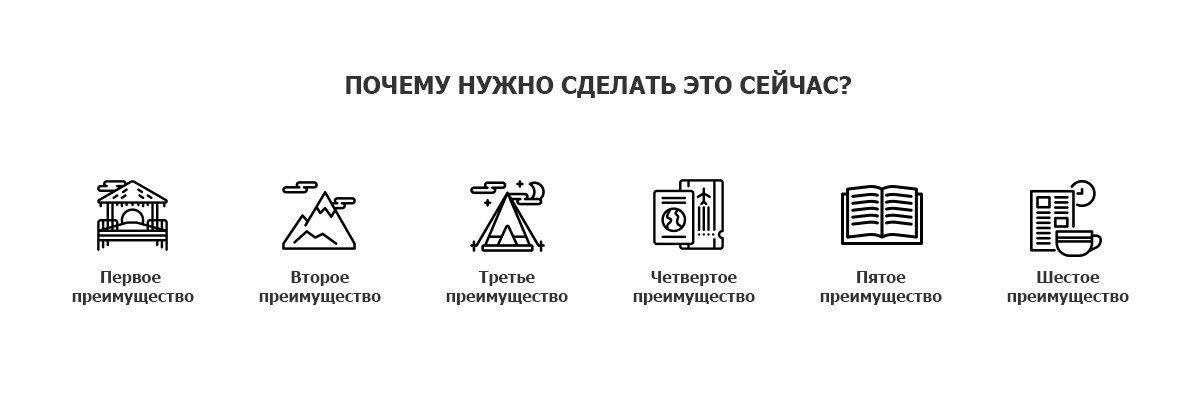
<style>
.page{position:relative;width:1200px;height:402px;background:#ffffff}
.page>*{position:absolute;margin:0}
.t1{font:24px "Tahoma-Bold";color:#333333;text-transform:uppercase}
.t2{font:16px "Tahoma-Bold";color:#333333}
</style>
<div class="page">
<p class="t1" style="left:346px;top:70px;width:506px;height:28px">Почему нужно сделать это сейчас?</p>
<p class="t2" style="left:72px;top:271px;width:122px;height:34px;text-align:center">Первое <br>преимущество</p>
<p class="t2" style="left:259px;top:271px;width:122px;height:34px;text-align:center">Второе<br>преимущество</p>
<p class="t2" style="left:446px;top:271px;width:122px;height:34px;text-align:center">Третье<br>преимущество</p>
<p class="t2" style="left:633px;top:271px;width:122px;height:34px;text-align:center">Четвертое<br>преимущество</p>
<p class="t2" style="left:820px;top:271px;width:122px;height:34px;text-align:center">Пятое<br>преимущество</p>
<p class="t2" style="left:1007px;top:271px;width:122px;height:34px;text-align:center">Шестое<br>преимущество</p>
</div>
